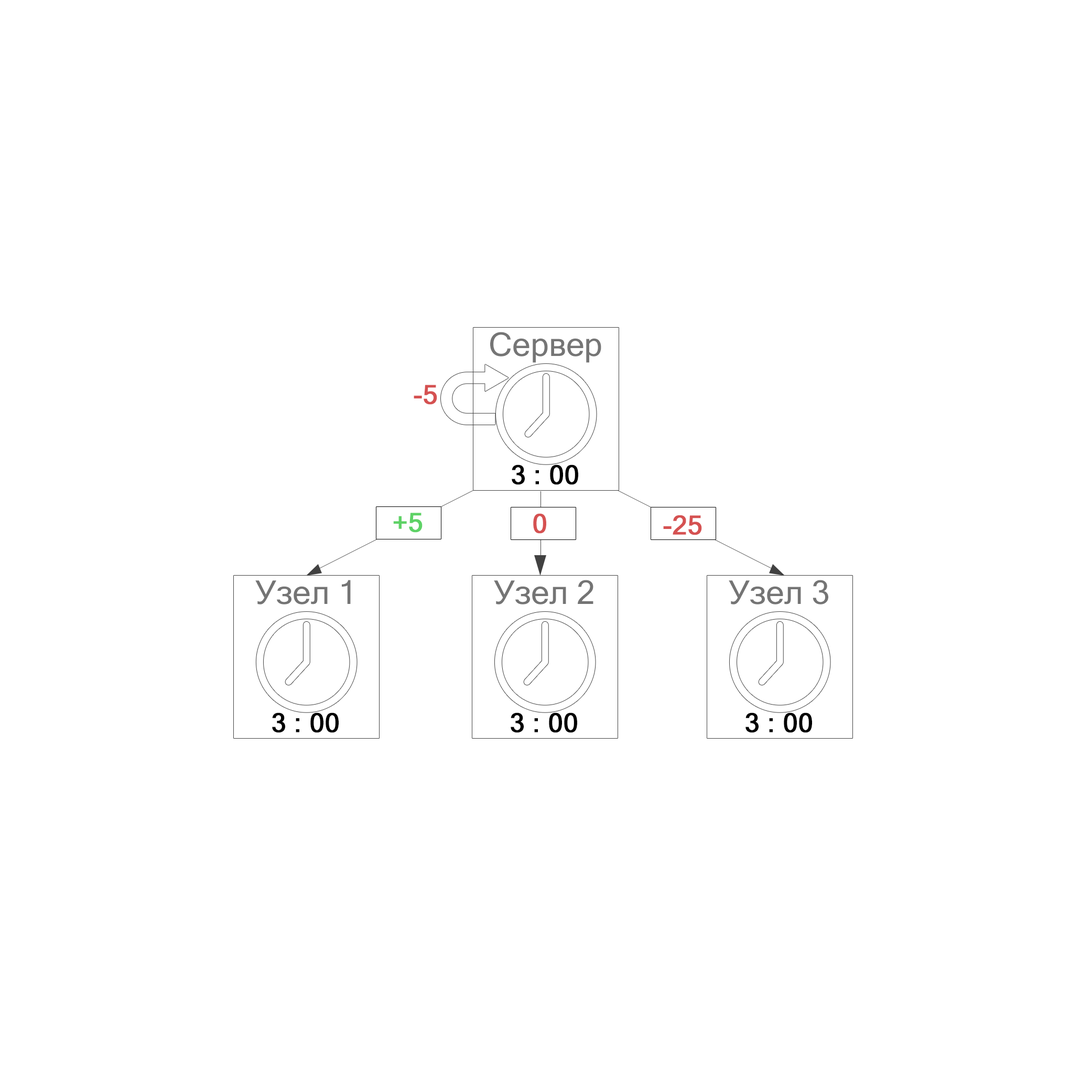
<style>
.page{position:relative;width:1092px;height:1092px;background:#ffffff}
.page>*{position:absolute;margin:0}
.t1{font:32.8px "MicrosoftSansSerif";color:#747474}
.t2{font:6.3px "MicrosoftSansSerif";color:#d55151;font-weight:bold}
.t3{font:26.2px "MicrosoftSansSerif";color:#000000;font-weight:bold}
.t4{font:6.3px "MicrosoftSansSerif";color:#5ed266;font-weight:bold}
</style>
<div class="page">
<p class="t1" style="left:490px;top:332px;width:111px;height:31px">Сервер</p>
<p class="t2" style="left:414px;top:385px;width:23px;height:20px;text-align:center">-5</p>
<p class="t3" style="left:512px;top:464px;width:66px;height:21px">3 : 00</p>
<p class="t4" style="left:393px;top:513px;width:30px;height:20px;text-align:center">+5</p>
<p class="t2" style="left:533px;top:513px;width:13px;height:21px;text-align:center">0</p>
<p class="t2" style="left:663px;top:515px;width:39px;height:20px;text-align:center">-25</p>
<p class="t1" style="left:255px;top:580px;width:96px;height:24px">Узел 1</p>
<p class="t1" style="left:494px;top:580px;width:99px;height:24px">Узел 2</p>
<p class="t1" style="left:729px;top:580px;width:99px;height:24px">Узел 3</p>
<p class="t3" style="left:272px;top:712px;width:67px;height:21px">3 : 00</p>
<p class="t3" style="left:511px;top:712px;width:66px;height:21px">3 : 00</p>
<p class="t3" style="left:745px;top:712px;width:67px;height:21px">3 : 00</p>
</div>
